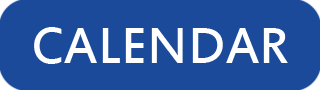
<style>
.page{position:relative;width:320px;height:90px;background:#1a4a99}
.page>*{position:absolute;margin:0}
.t1{font:56px "EstrangeloEdessa";color:#ffffff}
</style>
<div class="page">
<p class="t1" style="left:34px;top:27px;width:254px;height:37px">CALENDAR</p>
</div>
